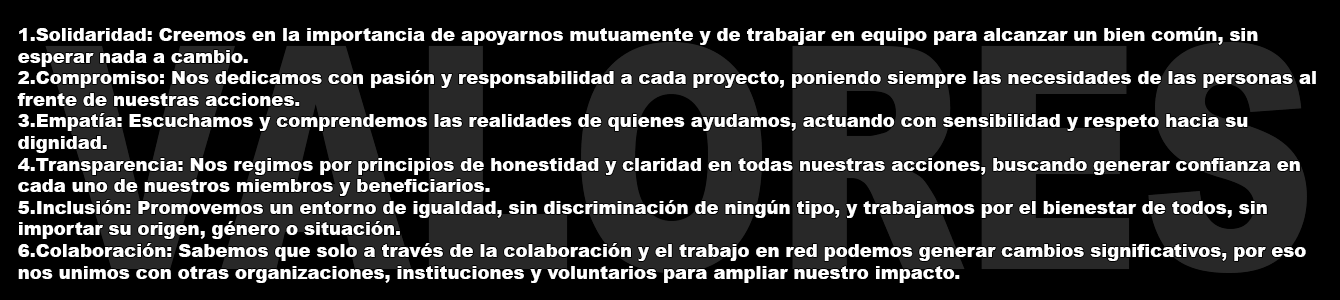
<style>
.page{position:relative;width:1340px;height:300px;background:#000000}
.page>*{position:absolute;margin:0}
.t1{font:18px "Arial-Black";color:#ffffff}
</style>
<div class="page">
<p class="t1" style="left:17px;top:27px;width:1299px;height:256px">1.Solidaridad: Creemos en la importancia de apoyarnos mutuamente y de trabajar en equipo para alcanzar un bien común, sin esperar nada a cambio.<br>2.Compromiso: Nos dedicamos con pasión y responsabilidad a cada proyecto, poniendo siempre las necesidades de las personas al frente de nuestras acciones.<br>3.Empatía: Escuchamos y comprendemos las realidades de quienes ayudamos, actuando con sensibilidad y respeto hacia su dignidad.<br>4.Transparencia: Nos regimos por principios de honestidad y claridad en todas nuestras acciones, buscando generar confianza en cada uno de nuestros miembros y beneficiarios.<br>5.Inclusión: Promovemos un entorno de igualdad, sin discriminación de ningún tipo, y trabajamos por el bienestar de todos, sin importar su origen, género o situación.<br>6.Colaboración: Sabemos que solo a través de la colaboración y el trabajo en red podemos generar cambios significativos, por eso nos unimos con otras organizaciones, instituciones y voluntarios para ampliar nuestro impacto.</p>
</div>
